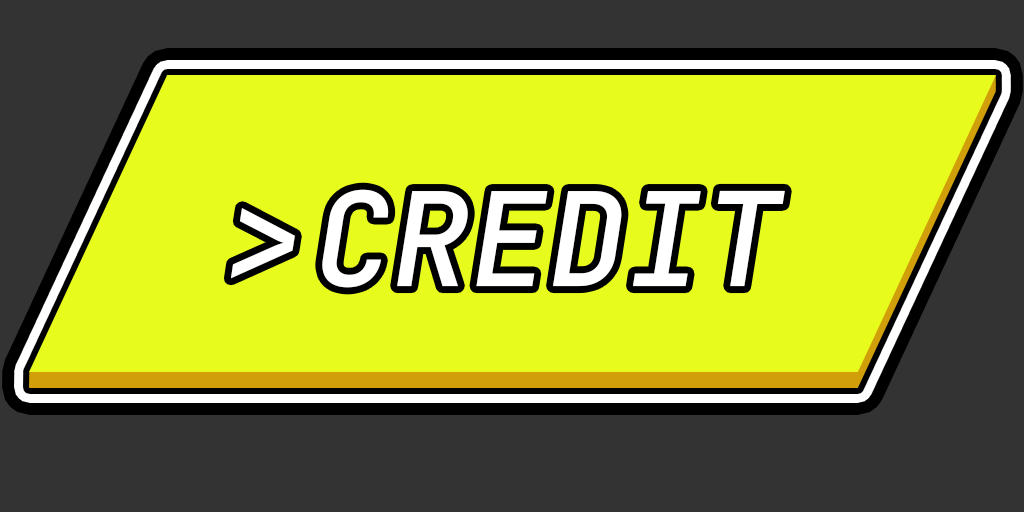
<style>
.page{position:relative;width:1024px;height:512px;background:#e7fc1c}
.page>*{position:absolute;margin:0}
.t1{font:130px "JetBrainsMonoItalic-MediumItalic";color:#ffffff}
</style>
<div class="page">
<p class="t1" style="left:230px;top:189px;width:555px;height:99px">CREDIT</p>
</div>
